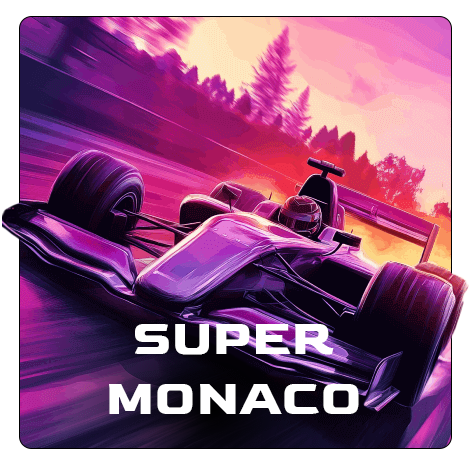
<style>
.page{position:relative;width:470px;height:470px}
.page>*{position:absolute;margin:0}
.t1{font:50px "Goldman-Bold";color:#ffffff}
</style>
<div class="page">
<p class="t1" style="left:109px;top:324px;width:250px;height:90px;text-align:center">SUPER<br>MONACO</p>
</div>
